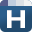
<style>
.page{position:relative;width:32px;height:32px;background:#214a6e}
.page>*{position:absolute;margin:0}
.t1{font:26px "GillSansMT-Bold";color:#ffffff}
</style>
<div class="page">
<p class="t1" style="left:7px;top:10px;width:18px;height:18px">H</p>
</div>
